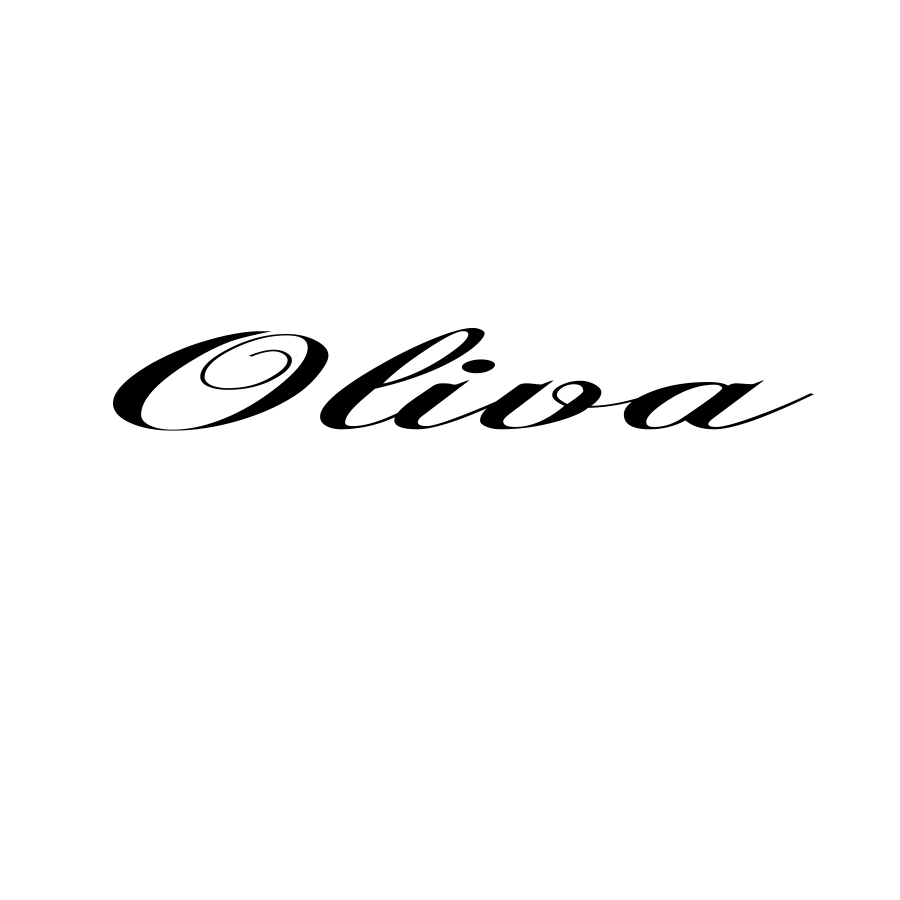
<style>
.page{position:relative;width:900px;height:900px;background:#ffffff}
.page>*{position:absolute;margin:0}
.t1{font:150px "Shekasteh_Beta";letter-spacing:-0.01em;color:#000000;scale:2.52 1}
</style>
<div class="page">
<p class="t1" style="left:113px;top:327px;width:701px;height:104px">Oliva</p>
</div>
